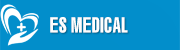
<style>
.page{position:relative;width:180px;height:50px;background:#028ecb}
.page>*{position:absolute;margin:0}
.t1{font:20.8px "VNI-Swiss-Condense-Bold";color:#ffffff;scale:0.77 1}
</style>
<div class="page">
<p class="t1" style="left:50px;top:17px;width:78px;height:16px">ES MEDICAL</p>
</div>
